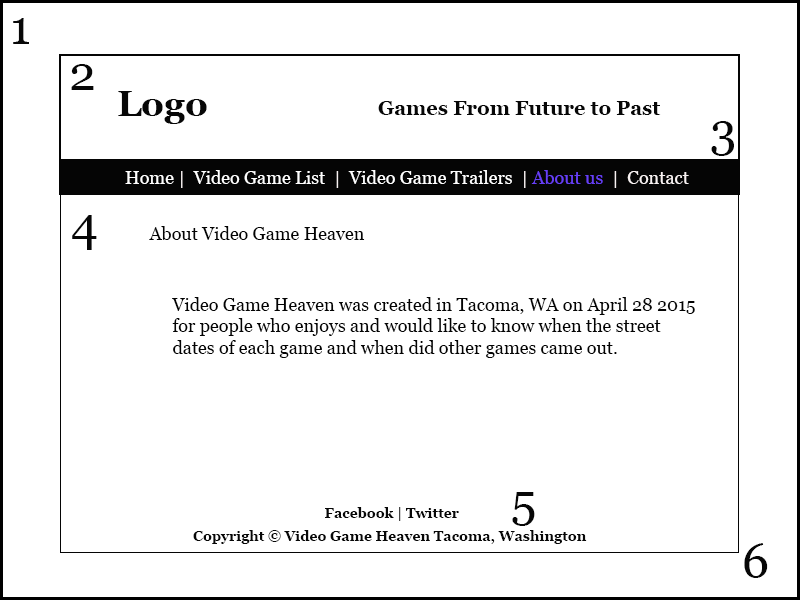
<style>
.page{position:relative;width:800px;height:600px;background:#ffffff}
.page>*{position:absolute;margin:0}
.t1{font:48px "Georgia";color:#070707}
.t2{font:36px "Georgia-Bold";color:#070707}
.t3{font:20px "Georgia-Bold";color:#070707}
.t4{font:18px "Georgia";color:#ffffff}
.t5{font:18px "Georgia";color:#f8f2f2}
.t6{font:18px "Georgia";color:#673ff8}
.t7{font:18px "Georgia";color:#030303}
.t8{font:14px "Georgia-Bold";color:#070707}
</style>
<div class="page">
<p class="t1" style="left:13px;top:18px;width:16px;height:26px">1</p>
<p class="t1" style="left:71px;top:64px;width:23px;height:26px">2</p>
<p class="t2" style="left:118px;top:91px;width:89px;height:33px">Logo</p>
<p class="t3" style="left:378px;top:101px;width:283px;height:14px">Games From Future to Past</p>
<p class="t1" style="left:711px;top:121px;width:23px;height:35px">3</p>
<p class="t4" style="left:125px;top:170px;width:564px;height:18px">Home<span class="t5"> |  </span>Video Game List<span class="t5">  |  </span>Video Game Trailers<span class="t5">  | </span><span class="t6">About us</span><span class="t5">  |  Contact</span></p>
<p class="t1" style="left:72px;top:215px;width:25px;height:35px">4</p>
<p class="t7" style="left:149px;top:226px;width:216px;height:14px">About Video Game Heaven</p>
<p class="t7" style="left:172px;top:297px;width:523px;height:61px">Video Game Heaven was created in Tacoma, WA on April 28 2015 for people who enjoys and would like to know when the street dates of each game and when did other games came out.</p>
<p class="t1" style="left:512px;top:492px;width:23px;height:34px">5</p>
<p class="t8" style="left:325px;top:507px;width:134px;height:14px">Facebook | Twitter</p>
<p class="t8" style="left:193px;top:530px;width:394px;height:14px">Copyright © Video Game Heaven Tacoma, Washington</p>
<p class="t1" style="left:744px;top:543px;width:24px;height:35px">6</p>
</div>
